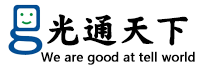
<style>
.page{position:relative;width:199px;height:70px;background:#ffffff}
.page>*{position:absolute;margin:0}
.t1{font:36px "DFKaiSho-SB-WIN-RKSJ-H";color:#000000;font-weight:bold}
.t2{font:12px "MicrosoftYaHei";color:#000000;font-weight:bold}
</style>
<div class="page">
<p class="t1" style="left:47px;top:14px;width:141px;height:32px">光通天下</p>
<p class="t2" style="left:41px;top:51px;width:154px;height:14px">We are good at tell world</p>
</div>
